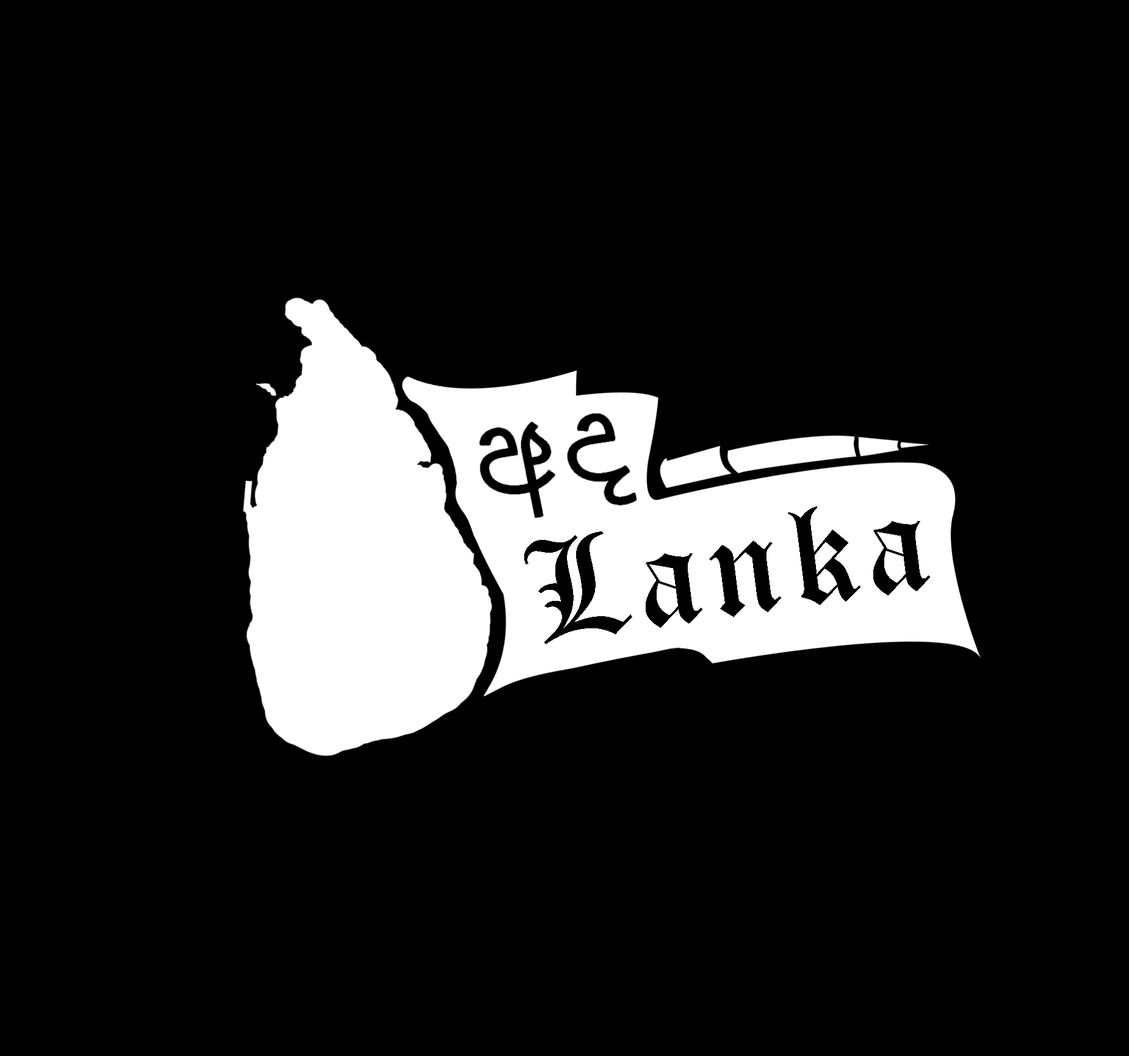
<style>
.page{position:relative;width:1129px;height:1056px;background:#000000}
.page>*{position:absolute;margin:0}
.t1{font:108.9px "NirmalaUI";letter-spacing:0.05em;color:#000000;scale:1.07 1}
.t2{font:140.7px "OldEnglishTextMT";letter-spacing:0.05em;color:#000000}
</style>
<div class="page">
<p class="t1" style="left:480px;top:414px;width:156px;height:103px;rotate:-8deg">අද</p>
<p class="t2" style="left:524px;top:506px;width:406px;height:138px;rotate:-8deg">Lanka</p>
</div>
